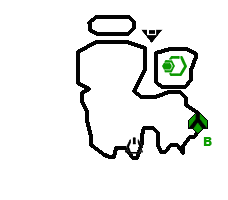
<style>
.page{position:relative;width:228px;height:200px;background:#ffffff}
.page>*{position:absolute;margin:0}
.t1{font:12px "Arial-Black";color:#0d9e01}
</style>
<div class="page">
<p class="t1" style="left:203px;top:137px;width:9px;height:9px">B</p>
</div>
